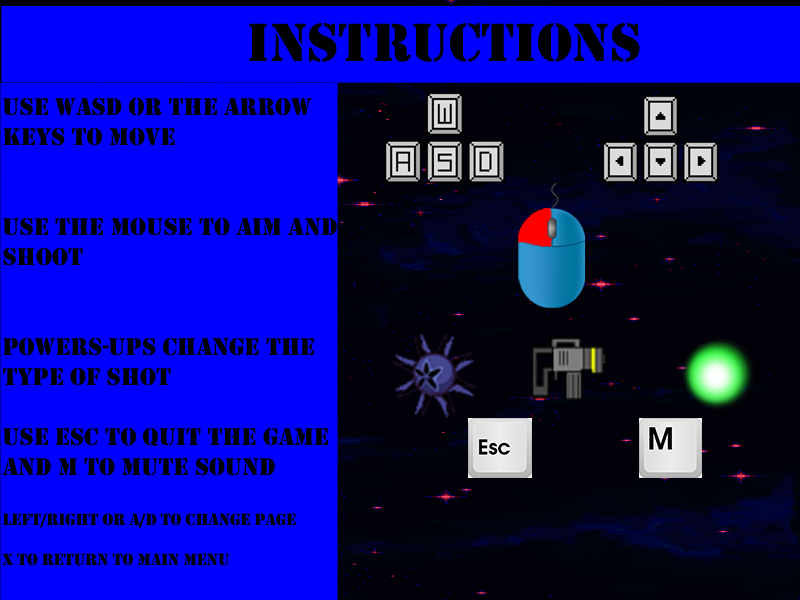
<style>
.page{position:relative;width:800px;height:600px;background:#0000ff}
.page>*{position:absolute;margin:0}
.t1{font:49.8px "StencilStd";color:#000000}
.t2{font:25px "Stencil";color:#000000}
.t3{font:16.7px "Stencil";color:#000000}
</style>
<div class="page">
<p class="t1" style="left:249px;top:23px;width:391px;height:39px">Instructions</p>
<p class="t2" style="left:2px;top:98px;width:335px;height:468px">Use WASD or the arrow keys to move<br><br><br>use the mouse to aim and shoot<br><br><br>powers-ups change the type of shot<br><br>Use ESC to quit the game and M to mute sound<br><br><span class="t3">left/right or A/d to change page<br><br>X to return to main Menu</span></p>
</div>
